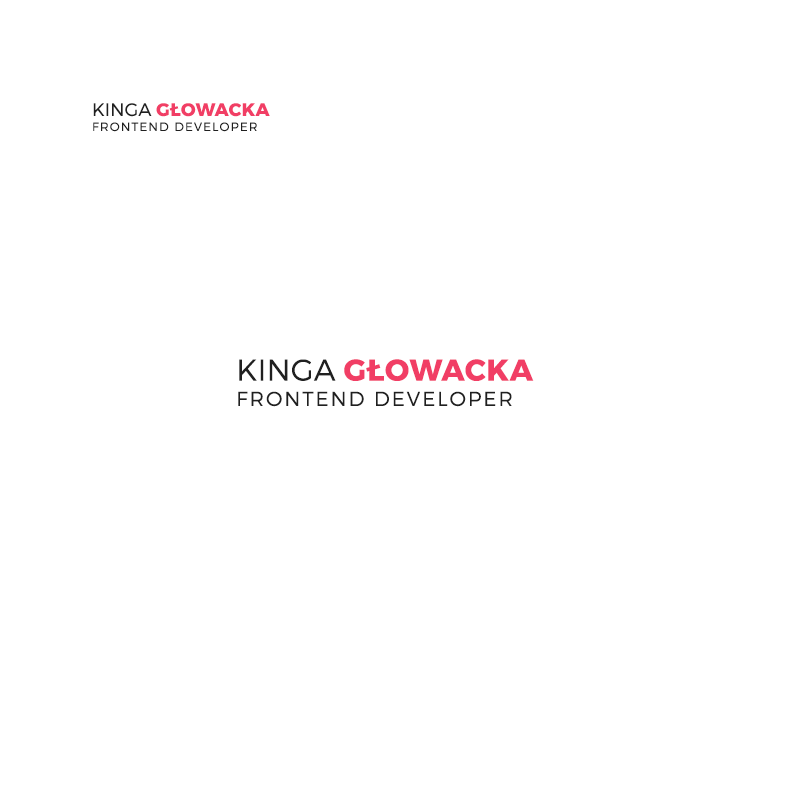
<style>
.page{position:relative;width:800px;height:800px;background:#ffffff}
.page>*{position:absolute;margin:0}
.t1{font:18px "Montserrat-Bold";letter-spacing:0.025em;color:#f13e65;text-transform:uppercase}
.t2{font:18px "Montserrat-Light";letter-spacing:0.01em;color:#202020;text-transform:uppercase}
.t3{font:12px "Montserrat-Light";letter-spacing:0.1em;color:#202020;text-transform:uppercase}
.t4{font:30.2px "Montserrat-Bold";letter-spacing:0.025em;color:#f13e65;text-transform:uppercase}
.t5{font:30.2px "Montserrat-Light";letter-spacing:0.01em;color:#202020;text-transform:uppercase}
.t6{font:20.2px "Montserrat-Light";letter-spacing:0.1em;color:#202020;text-transform:uppercase}
</style>
<div class="page">
<p class="t1" style="left:93px;top:103px;width:177px;height:14px"><span class="t2">Kinga </span>głowacka</p>
<p class="t3" style="left:93px;top:122px;width:164px;height:10px">FRONTEND DEVELOPER</p>
<p class="t4" style="left:239px;top:359px;width:295px;height:22px"><span class="t5">Kinga </span>głowacka</p>
<p class="t6" style="left:238px;top:391px;width:274px;height:16px">FRONTEND DEVELOPER</p>
</div>
